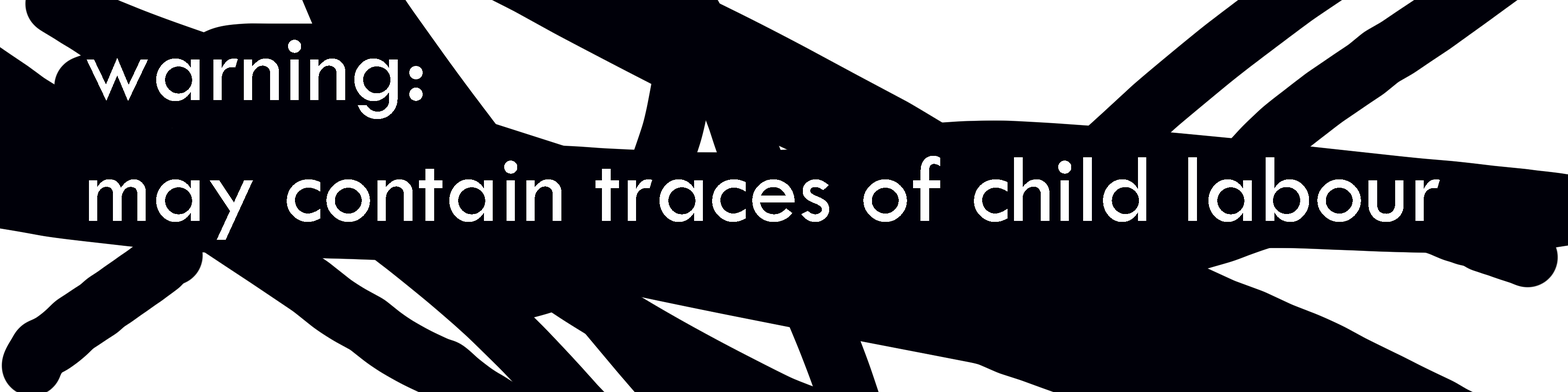
<style>
.page{position:relative;width:1568px;height:392px;background:#000009}
.page>*{position:absolute;margin:0}
.t1{font:100.5px "TwCenMT-Md";color:#ffffff}
</style>
<div class="page">
<p class="t1" style="left:87px;top:40px;width:1353px;height:200px">warning:<br>may contain traces of child labour</p>
</div>
